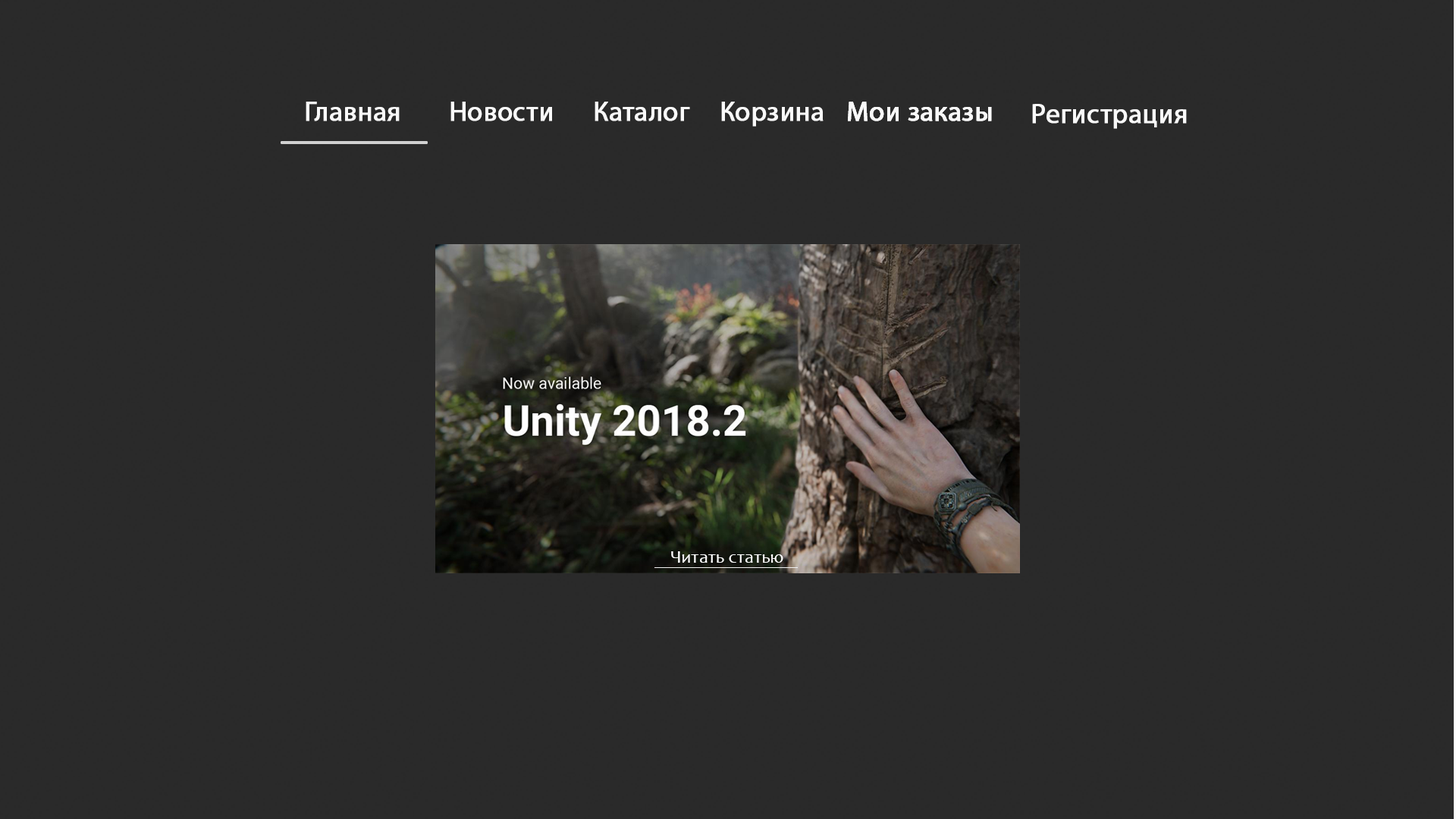
<style>
.page{position:relative;width:1456px;height:819px;background:#2a2a2a}
.page>*{position:absolute;margin:0}
.t1{font:27.3px "MyriadPro-Regular";color:#f9f9f9;font-weight:bold}
.t2{font:18.2px "Candara";color:#ffffff}
</style>
<div class="page">
<p class="t1" style="left:306px;top:102px;width:94px;height:19px">Главная</p>
<p class="t1" style="left:450px;top:102px;width:102px;height:19px">Новости</p>
<p class="t1" style="left:595px;top:102px;width:95px;height:19px">Каталог</p>
<p class="t1" style="left:721px;top:102px;width:103px;height:25px">Корзина</p>
<p class="t1" style="left:848px;top:102px;width:144px;height:19px">Мои заказы</p>
<p class="t1" style="left:848px;top:102px;width:144px;height:19px">Мои заказы</p>
<p class="t1" style="left:1032px;top:104px;width:155px;height:25px">Регистрация</p>
<p class="t2" style="left:671px;top:551px;width:112px;height:12px">Читать статью</p>
</div>
